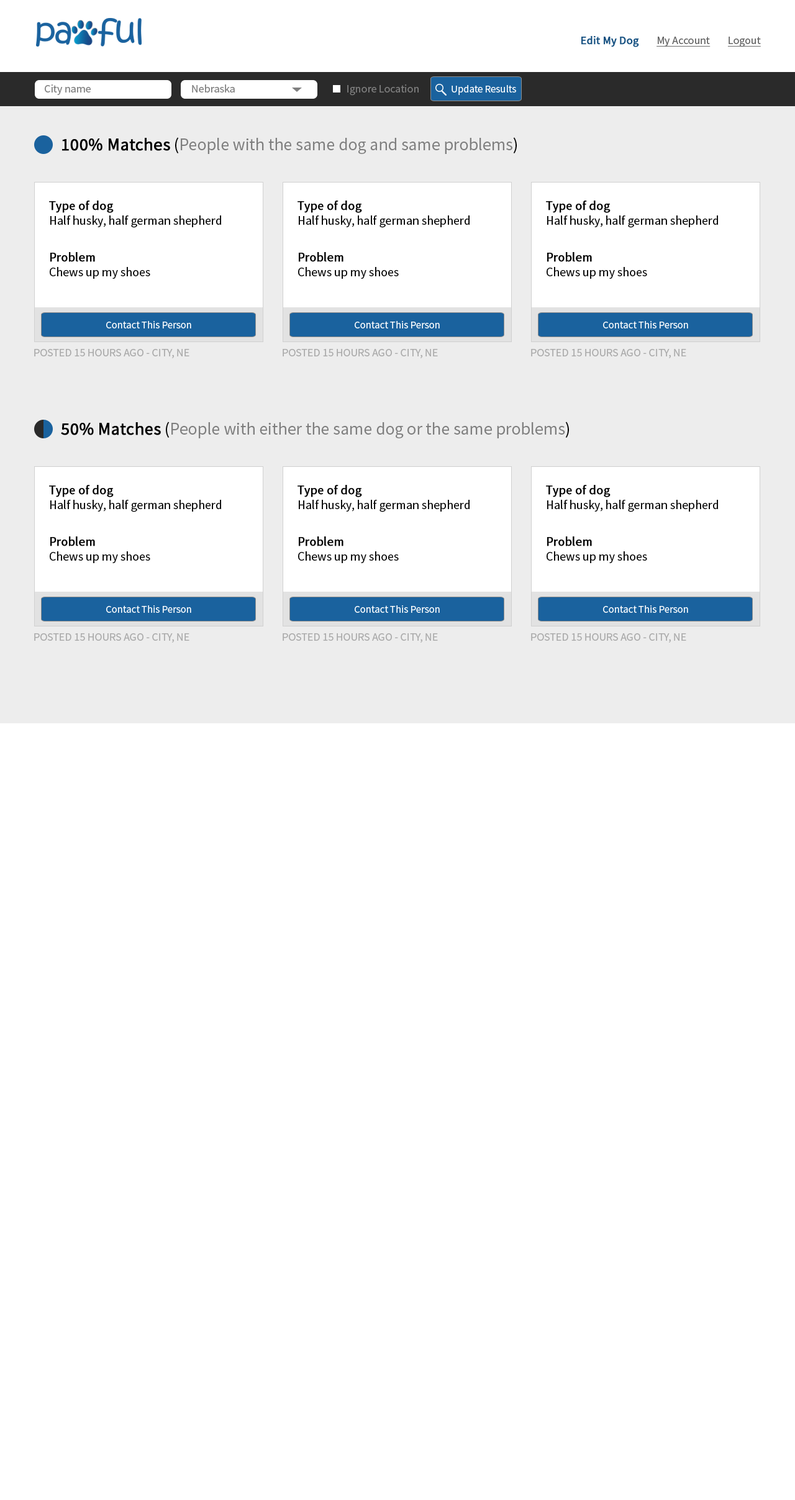
<style>
.page{position:relative;width:795px;height:1500px;background:#ffffff}
.page>*{position:absolute;margin:0}
.t1{font:11.2px "SourceSansPro-Regular";color:#636363;text-decoration:underline}
.t2{font:11.2px "SourceSansPro-Regular";color:#185282;font-weight:bold}
.t3{font:11.2px "SourceSansPro-Regular";color:#7f7f7f}
.t4{font:10.5px "SourceSansPro-Regular";color:#ffffff}
.t5{font:17.4px "SourceSansPro-Regular";color:#7e7e7e}
.t6{font:17.4px "SourceSansPro-Regular";color:#000000;font-weight:bold}
.t7{font:17.4px "SourceSansPro-Regular";color:#000000}
.t8{font:12.4px "SourceSansPro-Regular";color:#000000}
.t9{font:12.4px "SourceSansPro-Regular";color:#000000;font-weight:bold}
.t10{font:11.2px "SourceSansPro-Regular";color:#ababab}
</style>
<div class="page">
<p class="t1" style="left:581px;top:36px;width:180px;height:11px"><span class="t2">Edit My Dog        </span>My Account        Logout</p>
<p class="t3" style="left:45px;top:84px;width:46px;height:11px">City name</p>
<p class="t3" style="left:192px;top:84px;width:43px;height:9px">Nebraska</p>
<p class="t3" style="left:347px;top:84px;width:72px;height:12px">Ignore Location</p>
<p class="t4" style="left:451px;top:85px;width:65px;height:10px">Update Results</p>
<p class="t5" style="left:62px;top:137px;width:455px;height:17px"><span class="t6">100% Matches</span><span class="t7"> (</span>People with the same dog and same problems<span class="t7">)</span></p>
<p class="t8" style="left:49px;top:201px;width:172px;height:27px"><span class="t9">Type of dog<br></span>Half husky, half german shepherd</p>
<p class="t8" style="left:297px;top:201px;width:172px;height:27px"><span class="t9">Type of dog<br></span>Half husky, half german shepherd</p>
<p class="t8" style="left:546px;top:201px;width:172px;height:27px"><span class="t9">Type of dog<br></span>Half husky, half german shepherd</p>
<p class="t8" style="left:50px;top:252px;width:100px;height:27px"><span class="t9">Problem<br></span>Chews up my shoes</p>
<p class="t8" style="left:298px;top:252px;width:101px;height:27px"><span class="t9">Problem<br></span>Chews up my shoes</p>
<p class="t8" style="left:546px;top:252px;width:101px;height:27px"><span class="t9">Problem<br></span>Chews up my shoes</p>
<p class="t4" style="left:106px;top:321px;width:85px;height:7px">Contact This Person</p>
<p class="t4" style="left:355px;top:321px;width:85px;height:7px">Contact This Person</p>
<p class="t4" style="left:603px;top:321px;width:85px;height:7px">Contact This Person</p>
<p class="t10" style="left:34px;top:349px;width:155px;height:9px">POSTED 15 HOURS AGO - CITY, NE</p>
<p class="t10" style="left:283px;top:349px;width:155px;height:9px">POSTED 15 HOURS AGO - CITY, NE</p>
<p class="t10" style="left:531px;top:349px;width:155px;height:9px">POSTED 15 HOURS AGO - CITY, NE</p>
<p class="t5" style="left:61px;top:422px;width:508px;height:16px"><span class="t6">50% Matches</span><span class="t7"> (</span>People with either the same dog or the same problems<span class="t7">)</span></p>
<p class="t8" style="left:49px;top:485px;width:172px;height:27px"><span class="t9">Type of dog<br></span>Half husky, half german shepherd</p>
<p class="t8" style="left:297px;top:485px;width:172px;height:27px"><span class="t9">Type of dog<br></span>Half husky, half german shepherd</p>
<p class="t8" style="left:546px;top:485px;width:172px;height:27px"><span class="t9">Type of dog<br></span>Half husky, half german shepherd</p>
<p class="t8" style="left:50px;top:537px;width:100px;height:26px"><span class="t9">Problem<br></span>Chews up my shoes</p>
<p class="t8" style="left:298px;top:537px;width:101px;height:26px"><span class="t9">Problem<br></span>Chews up my shoes</p>
<p class="t8" style="left:546px;top:537px;width:101px;height:26px"><span class="t9">Problem<br></span>Chews up my shoes</p>
<p class="t4" style="left:106px;top:605px;width:85px;height:8px">Contact This Person</p>
<p class="t4" style="left:355px;top:605px;width:85px;height:8px">Contact This Person</p>
<p class="t4" style="left:603px;top:605px;width:85px;height:8px">Contact This Person</p>
<p class="t10" style="left:34px;top:633px;width:155px;height:10px">POSTED 15 HOURS AGO - CITY, NE</p>
<p class="t10" style="left:283px;top:633px;width:155px;height:10px">POSTED 15 HOURS AGO - CITY, NE</p>
<p class="t10" style="left:531px;top:633px;width:155px;height:10px">POSTED 15 HOURS AGO - CITY, NE</p>
</div>
